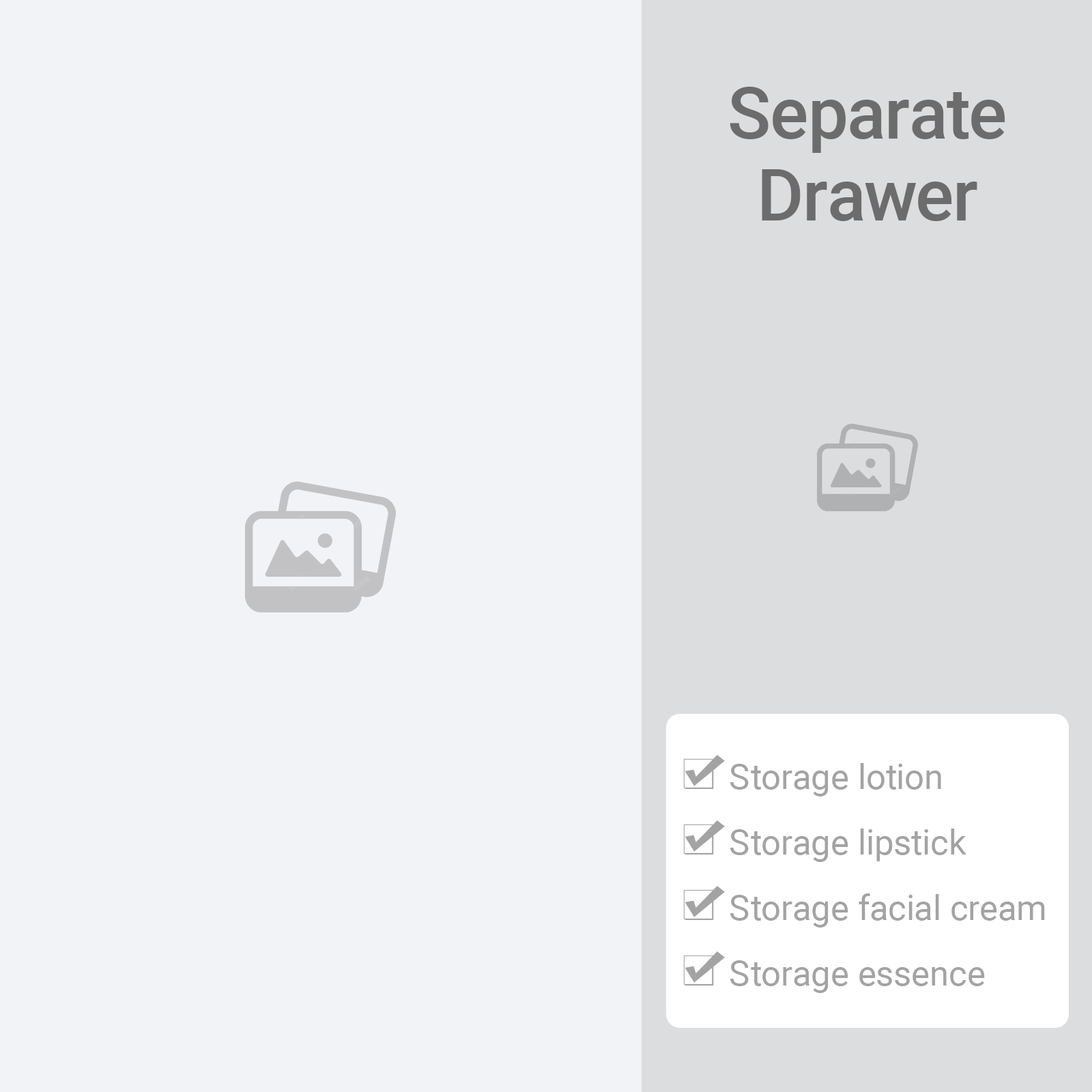
<style>
.page{position:relative;width:1092px;height:1092px;background:#f2f3f6}
.page>*{position:absolute;margin:0}
.t1{font:71.3px/81.9px "Roboto-Medium";color:#6c6c6c}
.t2{font:34.9px/65.5px "Roboto-Regular";color:#a3a3a3}
</style>
<div class="page">
<p class="t1" style="left:730px;top:87px;width:275px;height:134px;text-align:center">Separate<br>Drawer</p>
<p class="t2" style="left:730px;top:763px;width:315px;height:230px">Storage lotion<br>Storage lipstick<br>Storage facial cream<br>Storage essence</p>
</div>
